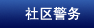
<style>
.page{position:relative;width:94px;height:28px}
.page>*{position:absolute;margin:0}
.t1{font:14px "SimHei";color:#ffffff}
</style>
<div class="page">
<p class="t1" style="left:25px;top:6px;width:56px;height:14px">社区警务</p>
</div>
